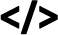
<style>
.page{position:relative;width:58px;height:35px;background:#ffffff}
.page>*{position:absolute;margin:0}
.t1{font:36px "NanumSquareEB";letter-spacing:-0.05em;color:#000000;font-weight:bold}
</style>
<div class="page">
<p class="t1" style="left:0px;top:0px;width:58px;height:35px">&lt;/&gt;</p>
</div>
